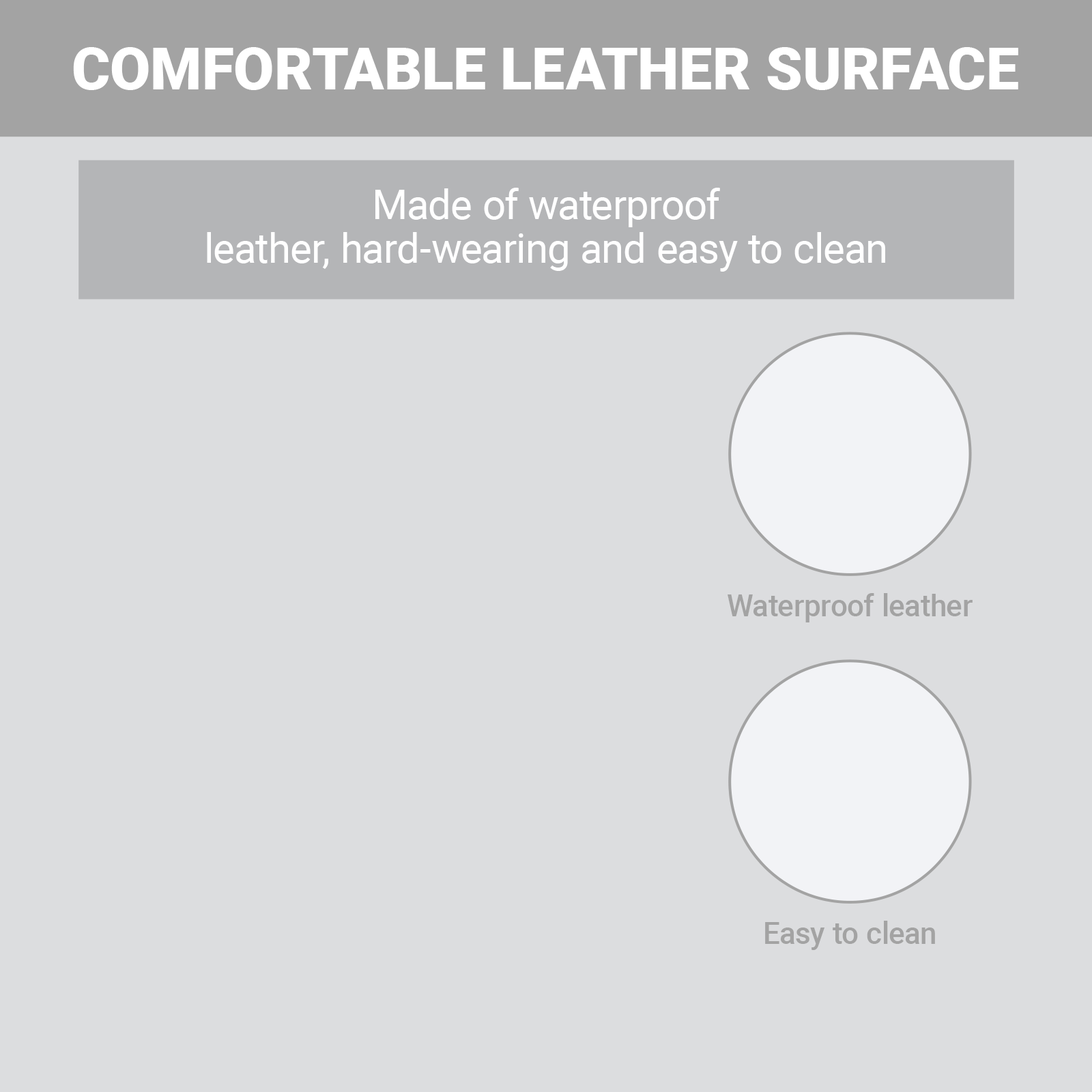
<style>
.page{position:relative;width:1092px;height:1092px;background:#dcdddf}
.page>*{position:absolute;margin:0}
.t1{font:58.6px "Roboto-Black";color:#ffffff}
.t2{font:40.8px/43.7px "Roboto-Regular";color:#ffffff}
.t3{font:30.1px "Roboto-Medium";color:#a3a3a3}
</style>
<div class="page">
<p class="t1" style="left:73px;top:47px;width:945px;height:43px">COMFORTABLE LEATHER SURFACE</p>
<p class="t2" style="left:207px;top:188px;width:678px;height:84px;text-align:center">Made of waterproof<br>leather, hard-wearing and easy to clean</p>
<p class="t3" style="left:728px;top:593px;width:245px;height:29px">Waterproof leather</p>
<p class="t3" style="left:765px;top:921px;width:170px;height:29px">Easy to clean</p>
</div>
